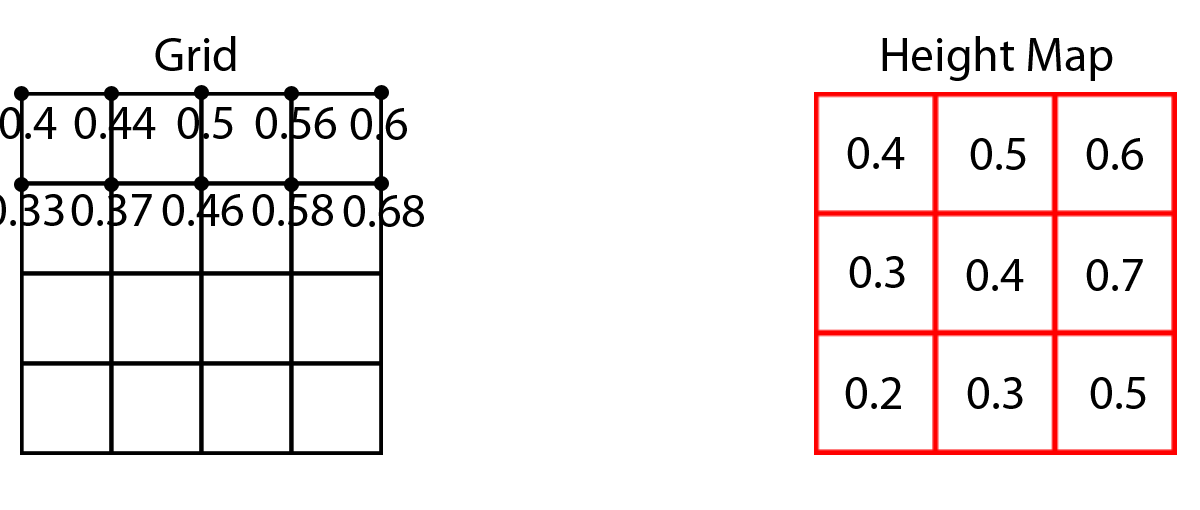
<style>
.page{position:relative;width:1200px;height:510px;background:#ffffff}
.page>*{position:absolute;margin:0}
.t1{font:48px "MyriadPro-Regular";color:#000000}
</style>
<div class="page">
<p class="t1" style="left:155px;top:36px;width:81px;height:35px">Grid</p>
<p class="t1" style="left:882px;top:36px;width:231px;height:45px">Height Map</p>
<p class="t1" style="left:0px;top:107px;width:57px;height:32px">0.4</p>
<p class="t1" style="left:74px;top:107px;width:82px;height:32px">0.44</p>
<p class="t1" style="left:177px;top:107px;width:56px;height:32px">0.5</p>
<p class="t1" style="left:255px;top:107px;width:81px;height:32px">0.56</p>
<p class="t1" style="left:350px;top:108px;width:57px;height:32px">0.6</p>
<p class="t1" style="left:847px;top:137px;width:58px;height:32px">0.4</p>
<p class="t1" style="left:970px;top:138px;width:56px;height:32px">0.5</p>
<p class="t1" style="left:1086px;top:138px;width:57px;height:32px">0.6</p>
<p class="t1" style="left:71px;top:194px;width:81px;height:32px">0.37</p>
<p class="t1" style="left:162px;top:194px;width:81px;height:32px">0.46</p>
<p class="t1" style="left:252px;top:194px;width:81px;height:32px">0.58</p>
<p class="t1" style="left:343px;top:195px;width:81px;height:32px">0.68</p>
<p class="t1" style="left:849px;top:256px;width:56px;height:32px">0.3</p>
<p class="t1" style="left:966px;top:259px;width:58px;height:32px">0.4</p>
<p class="t1" style="left:1086px;top:259px;width:57px;height:32px">0.7</p>
<p class="t1" style="left:845px;top:377px;width:56px;height:32px">0.2</p>
<p class="t1" style="left:967px;top:377px;width:56px;height:32px">0.3</p>
<p class="t1" style="left:1090px;top:377px;width:56px;height:32px">0.5</p>
</div>
